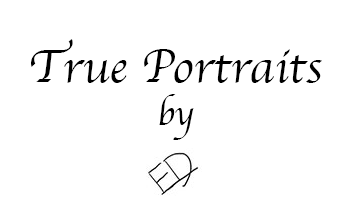
<style>
.page{position:relative;width:350px;height:210px;background:#ffffff}
.page>*{position:absolute;margin:0}
.t1{font:48px "Apple-Chancery";color:#000000}
.t2{font:36px "Apple-Chancery";color:#000000}
</style>
<div class="page">
<p class="t1" style="left:31px;top:39px;width:291px;height:101px;text-align:center">True Portraits<br><span class="t2">by</span></p>
</div>
